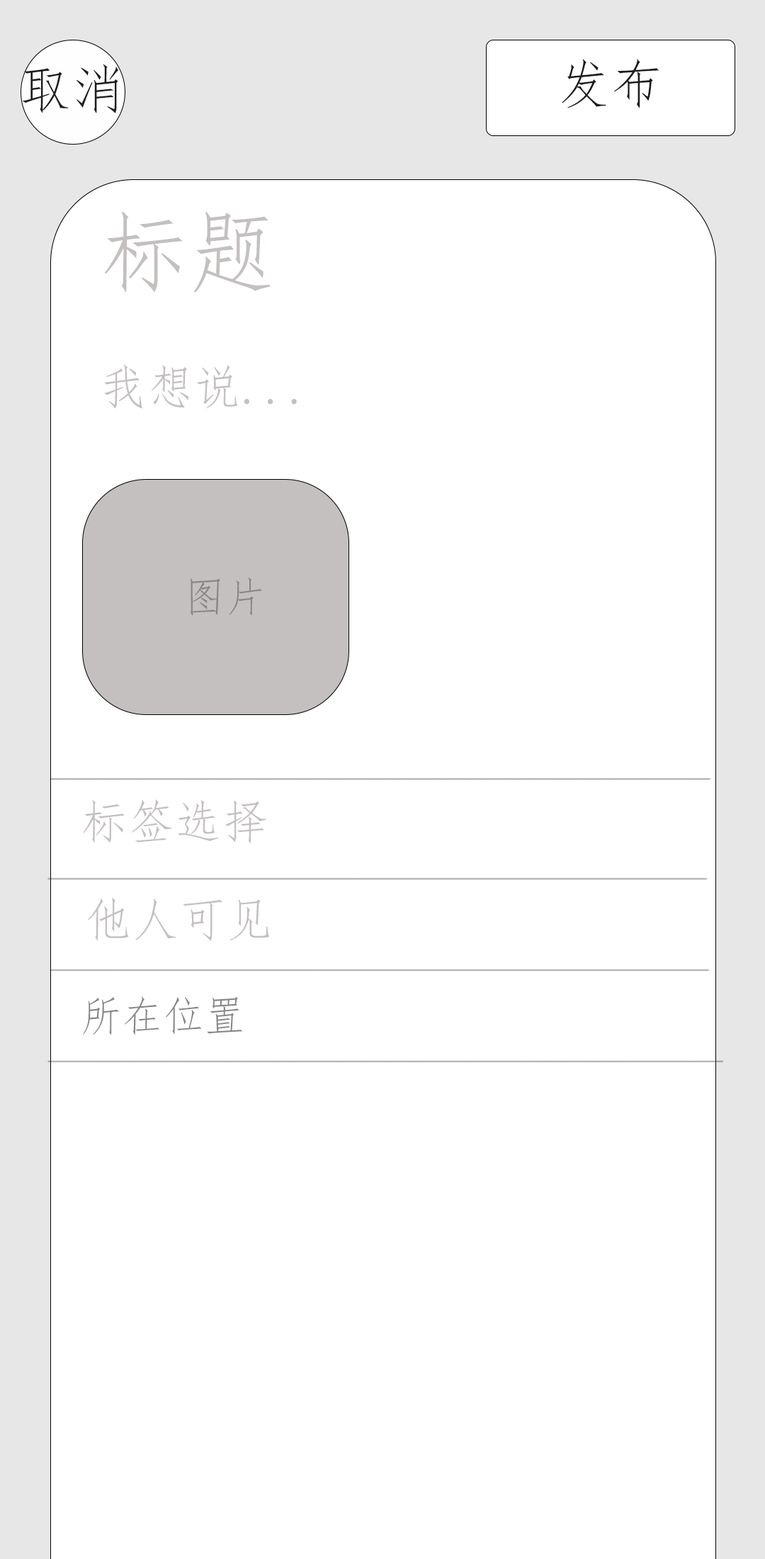
<style>
.page{position:relative;width:765px;height:1559px;background:#ffffff}
.page>*{position:absolute;margin:0}
.t1{font:53.1px "FangSong";color:#1e1d1d}
.t2{font:47.2px "FangSong";color:#c5c0c0}
.t3{font:88.6px "FangSong";color:#c5c0c0}
.t4{font:41.3px "FangSong";color:#878787}
</style>
<div class="page">
<p class="t1" style="left:22px;top:64px;width:96px;height:49px">取消</p>
<p class="t1" style="left:562px;top:59px;width:98px;height:49px">发布</p>
<p class="t2" style="left:104px;top:211px;width:193px;height:198px"><span class="t3">标题<br></span>我想说...</p>
<p class="t4" style="left:190px;top:577px;width:73px;height:39px">图片</p>
<p class="t2" style="left:83px;top:799px;width:183px;height:44px">标签选择</p>
<p class="t2" style="left:88px;top:897px;width:181px;height:44px">他人可见</p>
<p class="t4" style="left:83px;top:996px;width:160px;height:39px">所在位置</p>
</div>
